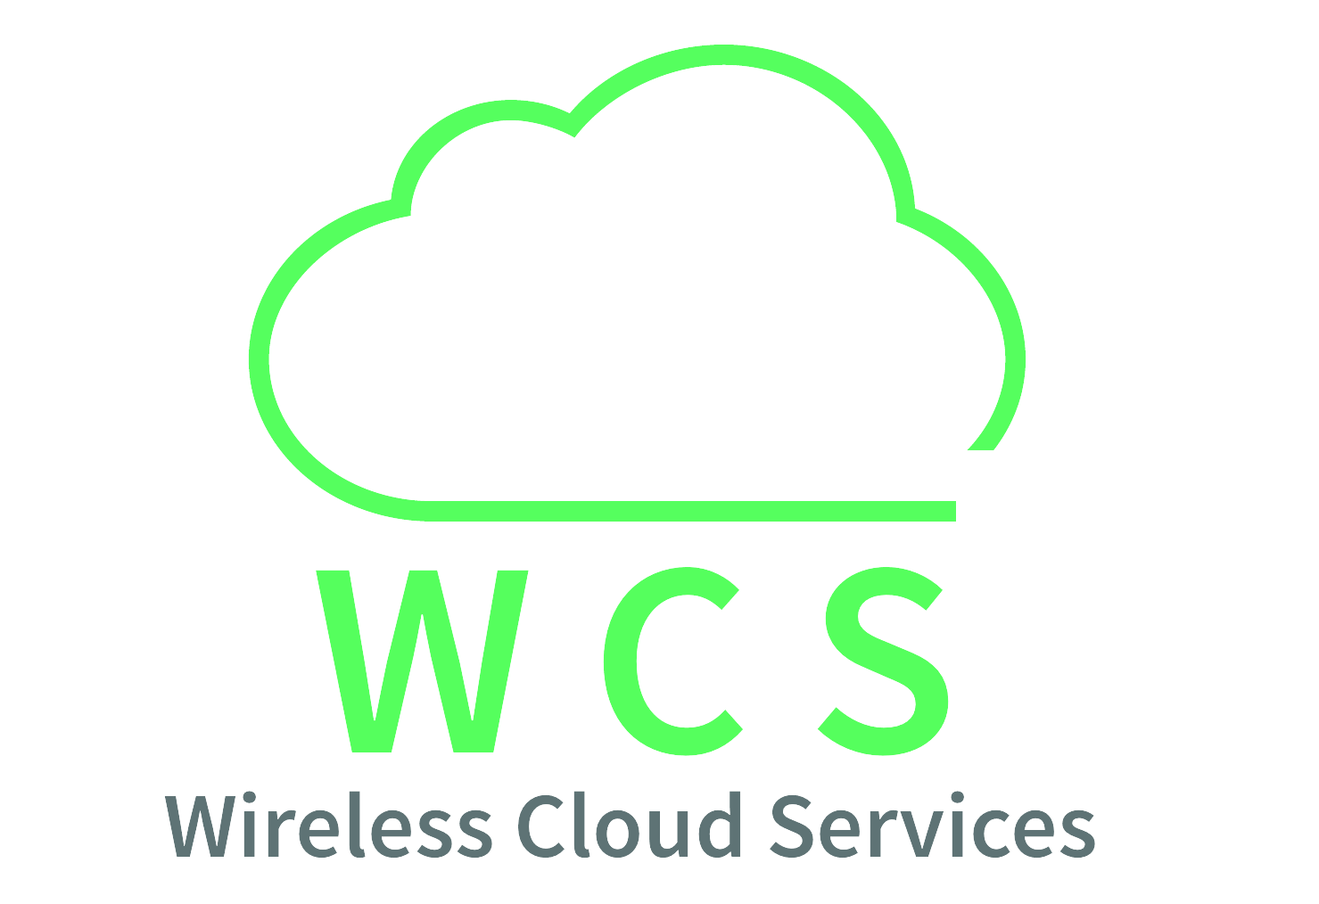
<style>
.page{position:relative;width:1319px;height:904px;background:#ffffff}
.page>*{position:absolute;margin:0}
.t1{font:278.7px "SourceSansPro-Semibold";color:#55ff5d}
.t2{font:92.9px "SourceSansPro-Semibold";color:#5e7375}
</style>
<div class="page">
<p class="t1" style="left:316px;top:566px;width:633px;height:190px">W C S</p>
<p class="t2" style="left:164px;top:791px;width:931px;height:68px">Wireless Cloud Services</p>
</div>
